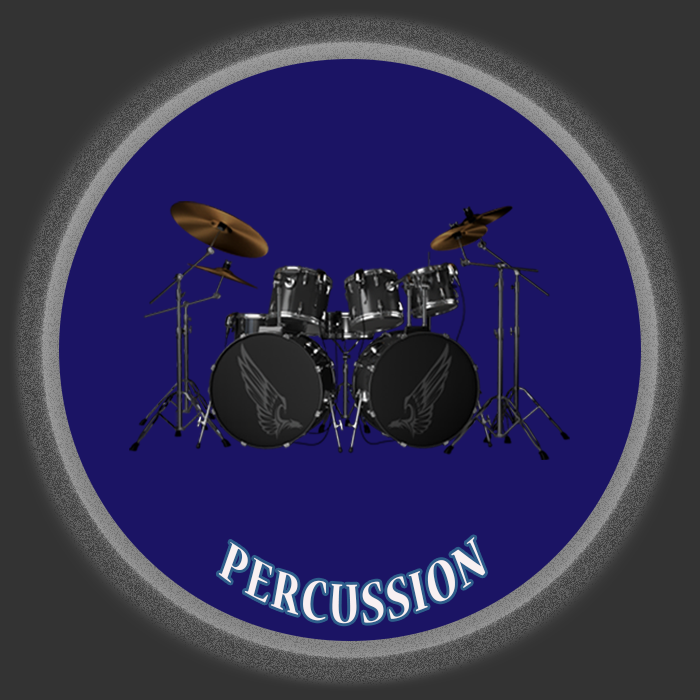
<style>
.page{position:relative;width:700px;height:700px;background:#1b1464}
.page>*{position:absolute;margin:0}
.t1{font:52.6px "NuevaStd-Bold";letter-spacing:0.05em;color:#f8f0f2;scale:0.83 1}
</style>
<div class="page">
<p class="t1" style="left:218px;top:537px;width:268px;height:87px;rotate:-1deg">PERCUSSION</p>
</div>
